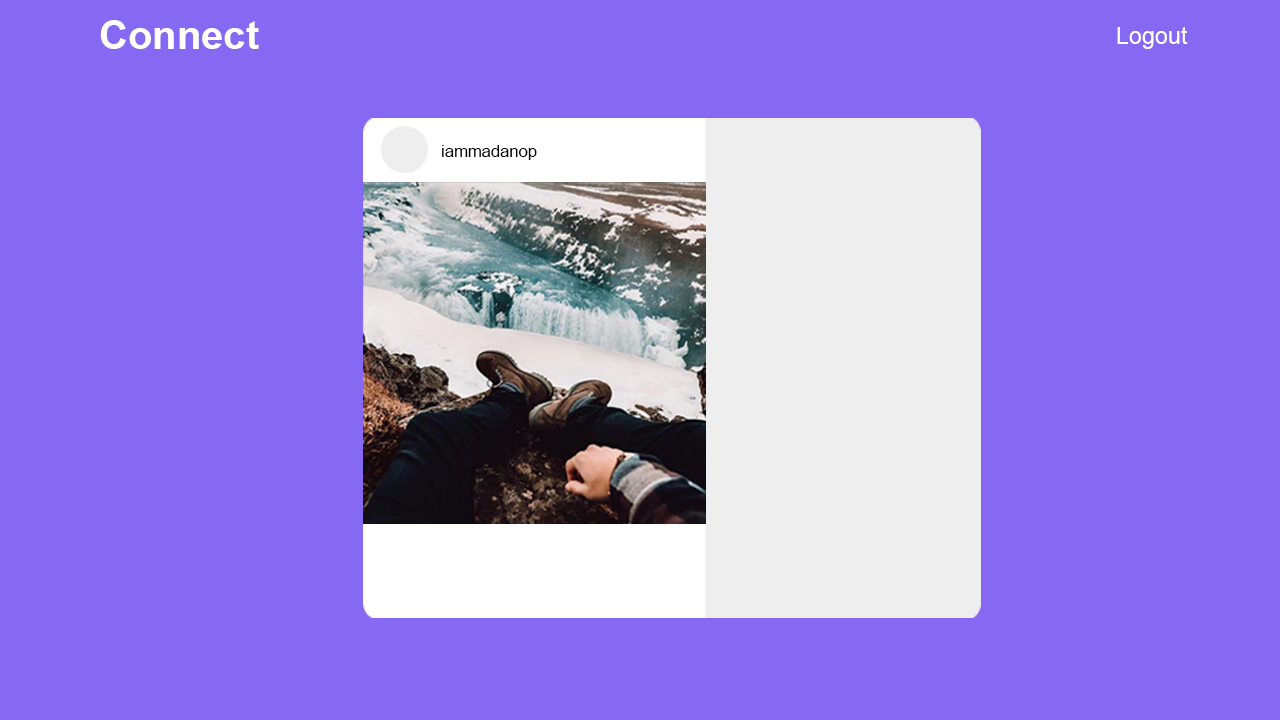
<style>
.page{position:relative;width:1280px;height:720px;background:#8569f3}
.page>*{position:absolute;margin:0}
.t1{font:40px "Arial-BoldMT";color:#ffffff}
.t2{font:23.3px "ArialMT";color:#ffffff}
.t3{font:16.9px "ArialMT";color:#000000}
</style>
<div class="page">
<p class="t1" style="left:100px;top:20px;width:159px;height:29px">Connect</p>
<p class="t2" style="left:1117px;top:27px;width:71px;height:22px">Logout</p>
<p class="t3" style="left:442px;top:145px;width:95px;height:15px">iammadanop</p>
</div>
